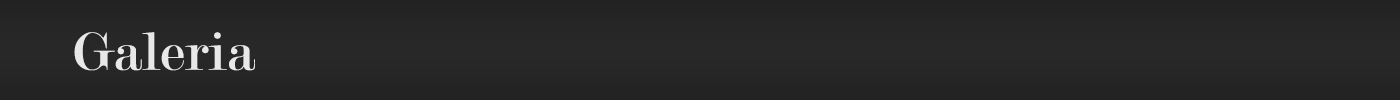
<style>
.page{position:relative;width:1400px;height:100px;background:#282828}
.page>*{position:absolute;margin:0}
.t1{font:57.2px "Modern-Regular";color:#ffffff;scale:1.05 1}
</style>
<div class="page">
<p class="t1" style="left:74px;top:32px;width:181px;height:39px;opacity:0.85">Galeria</p>
</div>
